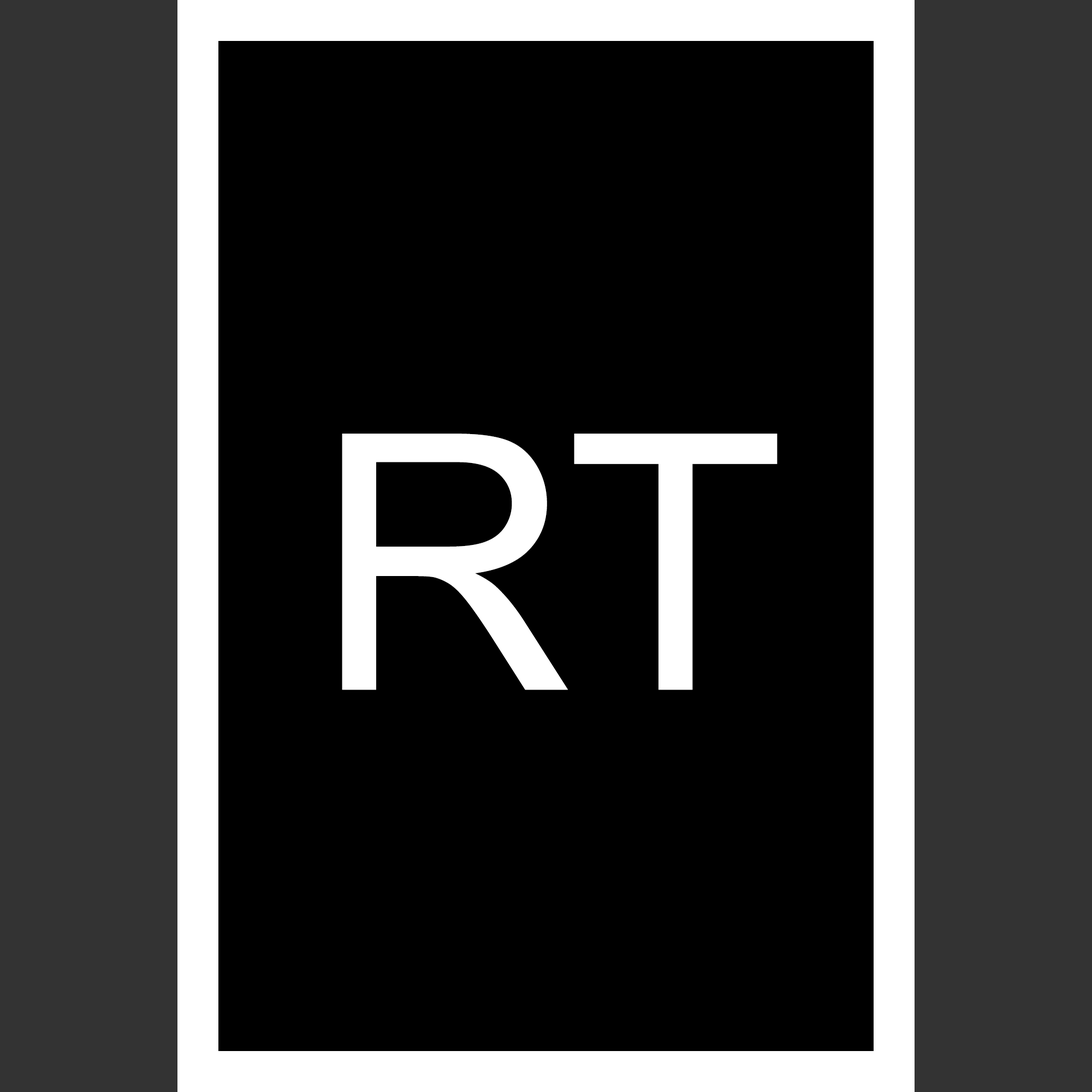
<style>
.page{position:relative;width:1092px;height:1092px;background:#000000}
.page>*{position:absolute;margin:0}
.t1{font:357.5px "ArialMT";color:#ffffff}
</style>
<div class="page">
<p class="t1" style="left:342px;top:434px;width:435px;height:256px">RT</p>
</div>
